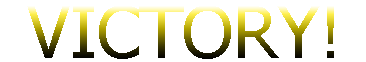
<style>
.page{position:relative;width:366px;height:62px;background:#ffffff}
.page>*{position:absolute;margin:0}
.t1{font:72px "Tahoma"}
</style>
<div class="page">
<p class="t1" style="left:27px;top:5px;width:307px;height:54px">VICTORY!</p>
</div>
